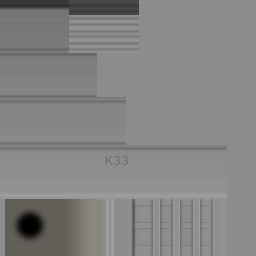
<style>
.page{position:relative;width:256px;height:256px;background:#8c8c8c}
.page>*{position:absolute;margin:0}
.t1{font:12px "ArialMT";letter-spacing:0.1em;color:#6f6f6e}
</style>
<div class="page">
<p class="t1" style="left:105px;top:156px;width:24px;height:9px">K33</p>
</div>
